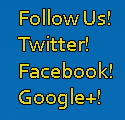
<style>
.page{position:relative;width:125px;height:120px}
.page>*{position:absolute;margin:0}
.t1{font:22px "Corbel";color:#ded321}
</style>
<div class="page">
<p class="t1" style="left:18px;top:9px;width:94px;height:100px">Follow Us!<br>Twitter!<br>Facebook!<br>Google+!</p>
</div>
